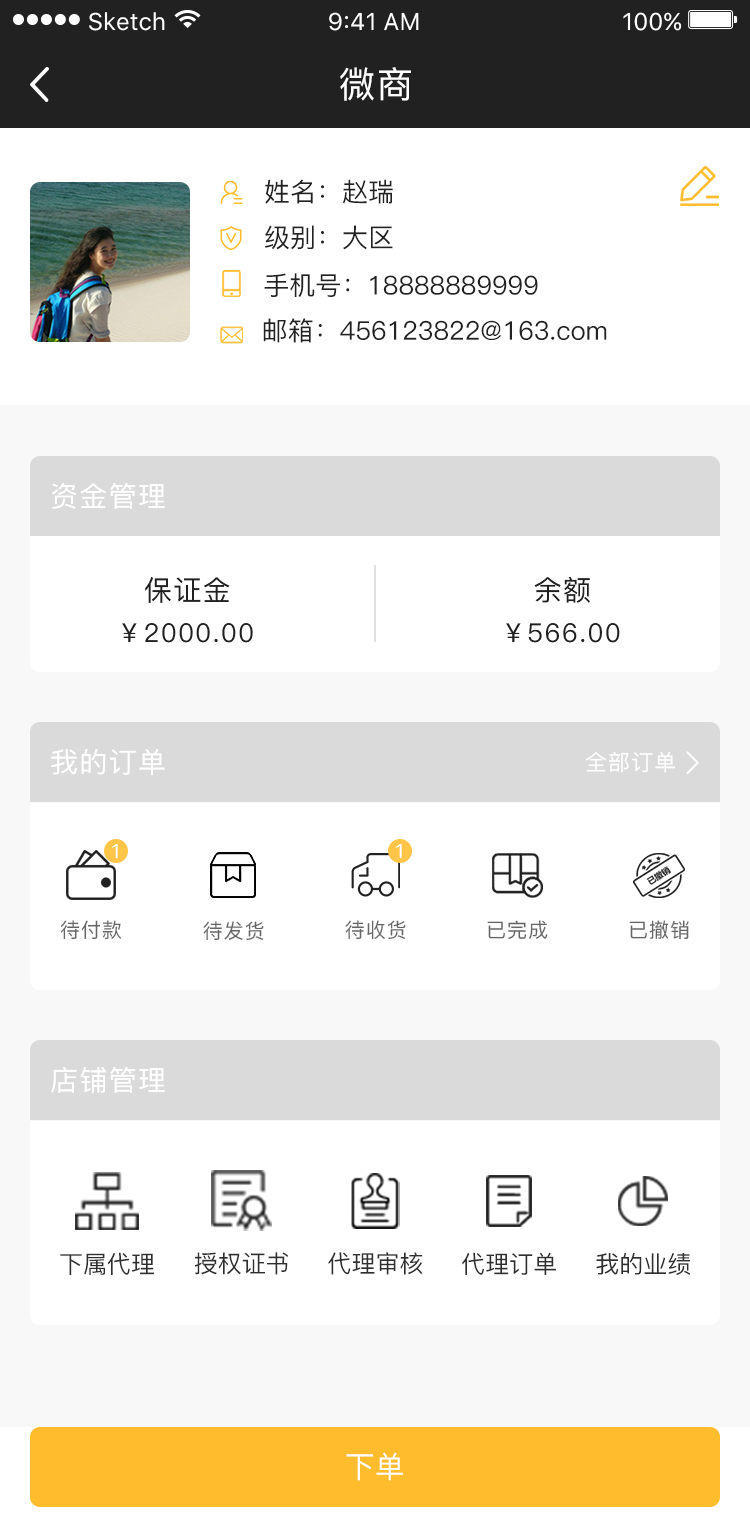
<style>
.page{position:relative;width:750px;height:1536px;background:#ffffff}
.page>*{position:absolute;margin:0}
.t1{font:36px "PingFang-SC-Medium";letter-spacing:0.05em;color:#ffffff}
.t2{font:26px "PingFang-SC-Medium";color:#222222}
.t3{font:28px "PingFang-SC-Medium";letter-spacing:0.05em;color:#ffffff}
.t4{font:28px "PingFang-SC-Medium";letter-spacing:0.05em;color:#212121}
.t5{font:26px "PingFang-SC-Medium";letter-spacing:0.05em;color:#212121}
.t6{font:22px "PingFang-SC-Medium";letter-spacing:0.05em;color:#ffffff}
.t7{font:20px "PingFang-SC-Medium";letter-spacing:0.05em;color:#ffffff}
.t8{font:20px "PingFang-SC-Medium";letter-spacing:0.05em;color:#666666}
.t9{font:24px "PingFang-SC-Medium";color:#2f2f2f}
.t10{font:30px "PingFang-SC-Medium";color:#ffffff}
</style>
<div class="page">
<p class="t1" style="left:340px;top:67px;width:71px;height:34px">微商</p>
<p class="t2" style="left:265px;top:179px;width:128px;height:25px">姓名：赵瑞</p>
<p class="t2" style="left:265px;top:225px;width:128px;height:25px">级别：大区</p>
<p class="t2" style="left:264px;top:273px;width:274px;height:24px">手机号：18888889999</p>
<p class="t2" style="left:263px;top:318px;width:344px;height:25px">邮箱：456123822@163.com</p>
<p class="t3" style="left:52px;top:483px;width:113px;height:26px">资金管理</p>
<p class="t4" style="left:144px;top:577px;width:86px;height:26px">保证金</p>
<p class="t4" style="left:534px;top:577px;width:56px;height:26px">余额</p>
<p class="t5" style="left:122px;top:623px;width:131px;height:20px">￥2000.00</p>
<p class="t5" style="left:506px;top:623px;width:114px;height:20px">￥566.00</p>
<p class="t3" style="left:51px;top:749px;width:114px;height:26px">我的订单</p>
<p class="t6" style="left:585px;top:751px;width:91px;height:22px">全部订单</p>
<p class="t7" style="left:112px;top:844px;width:6px;height:14px">1</p>
<p class="t7" style="left:396px;top:844px;width:6px;height:14px">1</p>
<p class="t8" style="left:60px;top:920px;width:62px;height:20px">待付款</p>
<p class="t8" style="left:203px;top:921px;width:61px;height:20px">待发货</p>
<p class="t8" style="left:345px;top:920px;width:61px;height:20px">待收货</p>
<p class="t8" style="left:487px;top:920px;width:61px;height:19px">已完成</p>
<p class="t8" style="left:629px;top:920px;width:60px;height:20px">已撤销</p>
<p class="t3" style="left:51px;top:1067px;width:114px;height:26px">店铺管理</p>
<p class="t9" style="left:60px;top:1252px;width:94px;height:23px">下属代理</p>
<p class="t9" style="left:194px;top:1252px;width:95px;height:23px">授权证书</p>
<p class="t9" style="left:328px;top:1252px;width:95px;height:23px">代理审核</p>
<p class="t9" style="left:462px;top:1252px;width:94px;height:23px">代理订单</p>
<p class="t9" style="left:596px;top:1252px;width:95px;height:23px">我的业绩</p>
<p class="t10" style="left:346px;top:1452px;width:57px;height:29px">下单</p>
</div>
